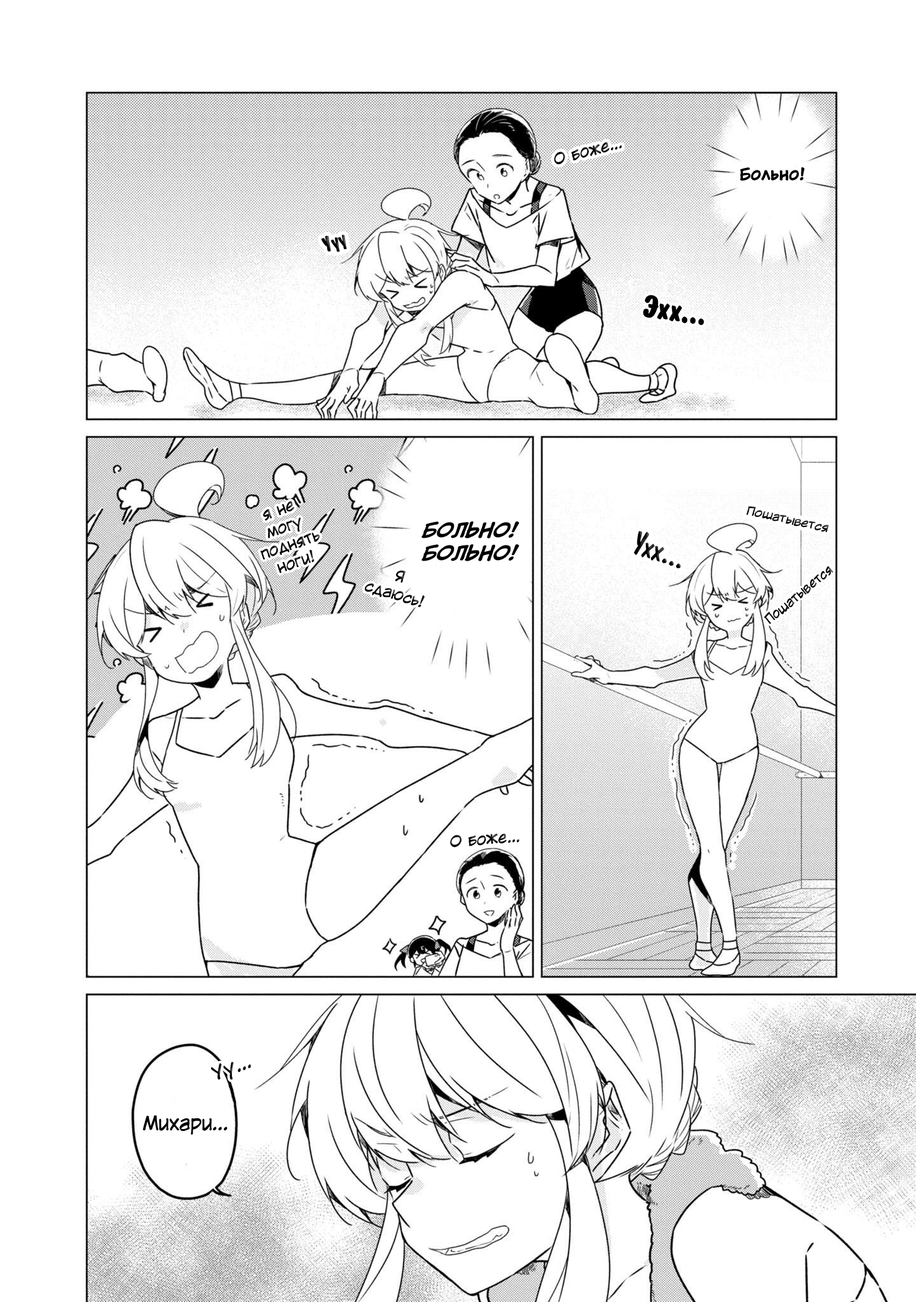
<style>
.page{position:relative;width:916px;height:1302px;background:#ffffff}
.page>*{position:absolute;margin:0}
.t1{font:15.3px "KuraiVoice2";color:#000000}
.t2{font:15.3px "KuraiVoice2-Bold";color:#000000}
.t3{font:19.1px "ADomInoBold";color:#000000}
.t4{font:30.5px "ADomInoBold";color:#000000}
.t5{font:11.4px "KuraiVoice2";color:#000000;scale:1.06 1}
.t6{font:19.1px "KuraiVoice2-BoldItalic";color:#000000}
.t7{font:30.5px "ADomIno";color:#000000}
.t8{font:12.1px "KuraiVoice2";color:#000000}
.t9{font:19.1px "KuraiVoice2";color:#000000}
</style>
<div class="page">
<p class="t1" style="left:554px;top:142px;width:68px;height:23px;rotate:-15deg">О боже...</p>
<p class="t2" style="left:740px;top:167px;width:65px;height:14px">Больно!</p>
<p class="t3" style="left:321px;top:235px;width:26px;height:17px;rotate:-22deg">Ууу</p>
<p class="t4" style="left:643px;top:295px;width:61px;height:30px;rotate:8deg">Эхх...</p>
<p class="t1" style="left:260px;top:501px;width:60px;height:72px;text-align:center;rotate:-19deg">я не<br>могу<br>поднять<br>ноги!</p>
<p class="t5" style="left:746px;top:506px;width:83px;height:26px;rotate:13deg">Пошатывется</p>
<p class="t6" style="left:421px;top:521px;width:98px;height:40px;text-align:center">БОЛЬНО!<br>БОЛЬНО!</p>
<p class="t7" style="left:634px;top:531px;width:47px;height:37px;rotate:19deg">Ухх...</p>
<p class="t8" style="left:764px;top:566px;width:69px;height:58px;rotate:-40deg">Пошатывется</p>
<p class="t1" style="left:364px;top:570px;width:61px;height:37px;text-align:center;rotate:17deg">Я<br>сдаюсь!</p>
<p class="t1" style="left:450px;top:833px;width:69px;height:14px;rotate:-5deg">О боже...</p>
<p class="t9" style="left:211px;top:1062px;width:40px;height:17px;rotate:-21deg">Уу...</p>
<p class="t9" style="left:143px;top:1115px;width:85px;height:20px">Михари...</p>
</div>
